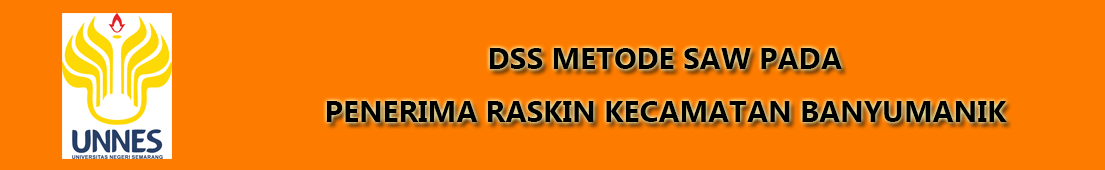
<style>
.page{position:relative;width:1105px;height:170px;background:#fd7c00}
.page>*{position:absolute;margin:0}
.t1{font:30px "MicrosoftNewTaiLue-Bold";color:#000000}
</style>
<div class="page">
<p class="t1" style="left:489px;top:48px;width:353px;height:21px">DSS METODE SAW PADA</p>
<p class="t1" style="left:326px;top:101px;width:681px;height:21px">PENERIMA RASKIN KECAMATAN BANYUMANIK</p>
</div>
